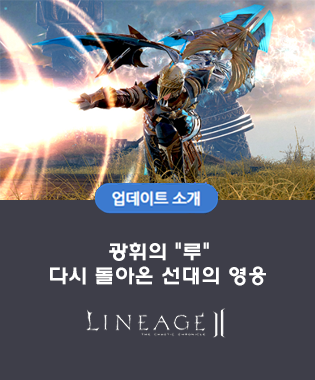
<style>
.page{position:relative;width:315px;height:380px;background:#3e3e49}
.page>*{position:absolute;margin:0}
.t1{font:20px "HYwulB";color:#ffffff}
</style>
<div class="page">
<p class="t1" style="left:50px;top:242px;width:216px;height:44px">광휘의 "루"<br>다시 돌아온 선대의 영웅</p>
</div>
